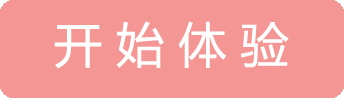
<style>
.page{position:relative;width:344px;height:98px;background:#f49794}
.page>*{position:absolute;margin:0}
.t1{font:48px "MicrosoftYaHeiUI";color:#ffffff}
</style>
<div class="page">
<p class="t1" style="left:54px;top:21px;width:235px;height:48px">开 始 体 验</p>
</div>
